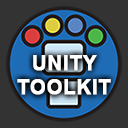
<style>
.page{position:relative;width:128px;height:128px;background:#333333}
.page>*{position:absolute;margin:0}
.t1{font:20px "Arial-BoldMT";letter-spacing:0.025em;color:#ffffff;font-weight:bold}
</style>
<div class="page">
<p class="t1" style="left:17px;top:55px;width:94px;height:40px;text-align:center">UNITY TOOLKIT</p>
</div>
